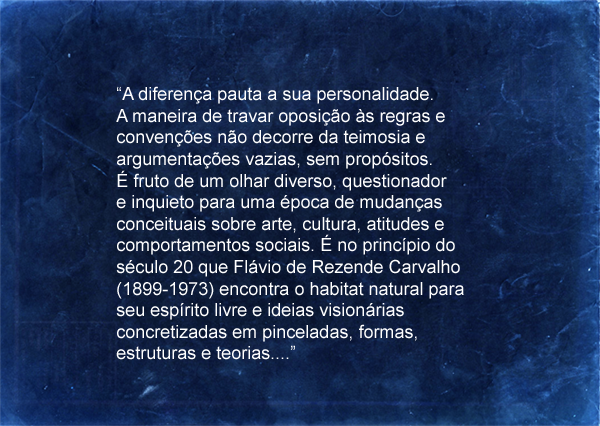
<style>
.page{position:relative;width:600px;height:426px}
.page>*{position:absolute;margin:0}
.t1{font:18px "ArialMT";color:#ffffff}
</style>
<div class="page">
<p class="t1" style="left:116px;top:86px;width:348px;height:274px">“A diferença pauta a sua personalidade. <br>A maneira de travar oposição às regras e <br>convenções não decorre da teimosia e <br>argumentações vazias, sem propósitos. <br>É fruto de um olhar diverso, questionador <br>e inquieto para uma época de mudanças <br>conceituais sobre arte, cultura, atitudes e <br>comportamentos sociais. É no princípio do <br>século 20 que Flávio de Rezende Carvalho <br>(1899-1973) encontra o habitat natural para <br>seu espírito livre e ideias visionárias <br>concretizadas em pinceladas, formas, <br>estruturas e teorias....”</p>
</div>
